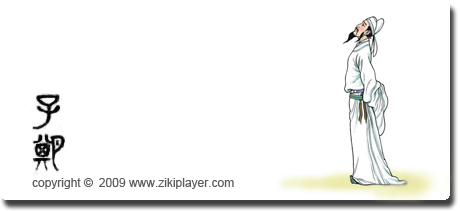
<style>
.page{position:relative;width:460px;height:211px;background:#ffffff}
.page>*{position:absolute;margin:0}
.t1{font:12px "ArialMT";color:#5d5d5d}
</style>
<div class="page">
<p class="t1" style="left:32px;top:178px;width:202px;height:11px">copyright © 2009 www.zikiplayer.com</p>
</div>
